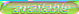
<style>
.page{position:relative;width:79px;height:14px}
.page>*{position:absolute;margin:0}
.t1{font:11px "Verdana-Bold"}
</style>
<div class="page">
<p class="t1" style="left:12px;top:2px;width:55px;height:10px">available</p>
</div>
